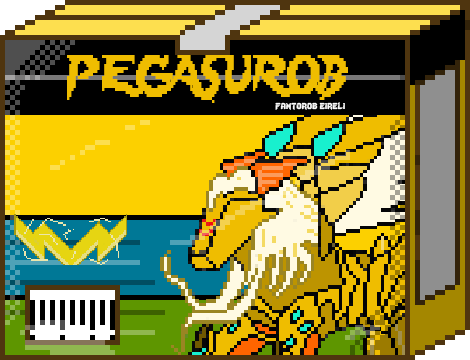
<style>
.page{position:relative;width:470px;height:360px}
.page>*{position:absolute;margin:0}
.t1{font:48px "Lady-Radical";color:#efbd00;scale:0.72 1}
.t2{font:12px "Lady-Radical";color:#fbfbfb}
</style>
<div class="page">
<p class="t1" style="left:67px;top:52px;width:281px;height:51px">PEGASUROB</p>
<p class="t2" style="left:275px;top:102px;width:70px;height:8px">fantorob eireli</p>
</div>
